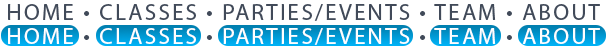
<style>
.page{position:relative;width:609px;height:48px;background:#ffffff}
.page>*{position:absolute;margin:0}
.t1{font:23px "MyriadPro-Regular";letter-spacing:0.1em;color:#414a59}
.t2{font:23px "MyriadPro-Regular";letter-spacing:0.1em;color:#ffffff}
.t3{font:23px "MyriadPro-Regular";letter-spacing:0.1em;color:#fefeff}
</style>
<div class="page">
<p class="t1" style="left:8px;top:4px;width:592px;height:17px">HOME • CLASSES • PARTIES/EVENTS • TEAM • ABOUT</p>
<p class="t2" style="left:8px;top:28px;width:592px;height:17px">HOME <span class="t1">• </span>CLASSES<span class="t1"> • </span>PARTIES/EVENTS<span class="t1"> • </span><span class="t3">TEAM </span><span class="t1">• </span>ABOUT</p>
</div>
